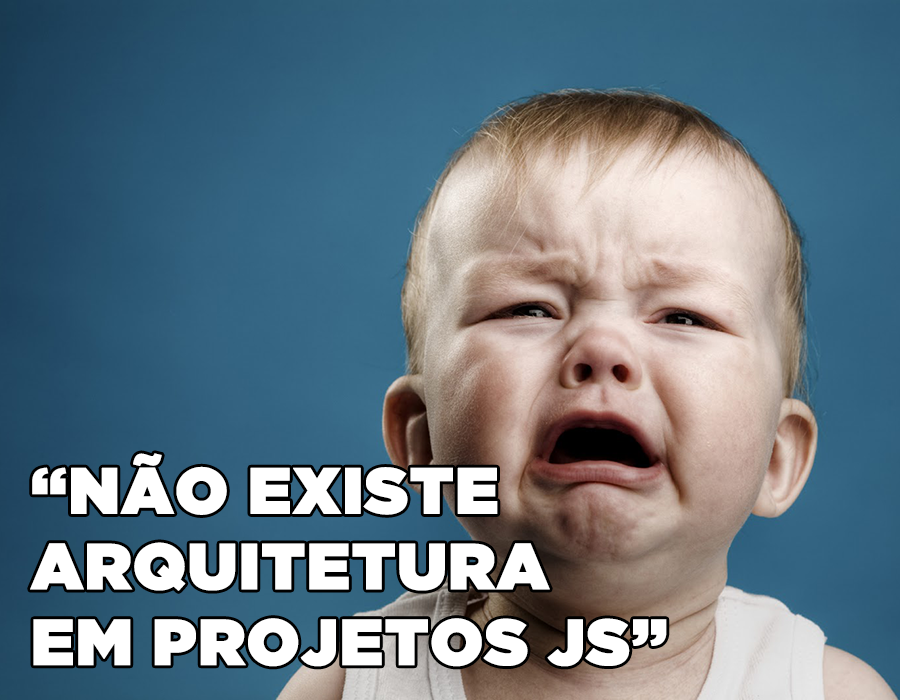
<style>
.page{position:relative;width:900px;height:700px}
.page>*{position:absolute;margin:0}
.t1{font:65px/75.7px "GothamUltra";color:#ffffff;font-weight:bold}
</style>
<div class="page">
<p class="t1" style="left:30px;top:453px;width:637px;height:214px">“NÃO EXISTE<br>ARQUITETURA<br>EM PROJETOS JS”</p>
</div>
